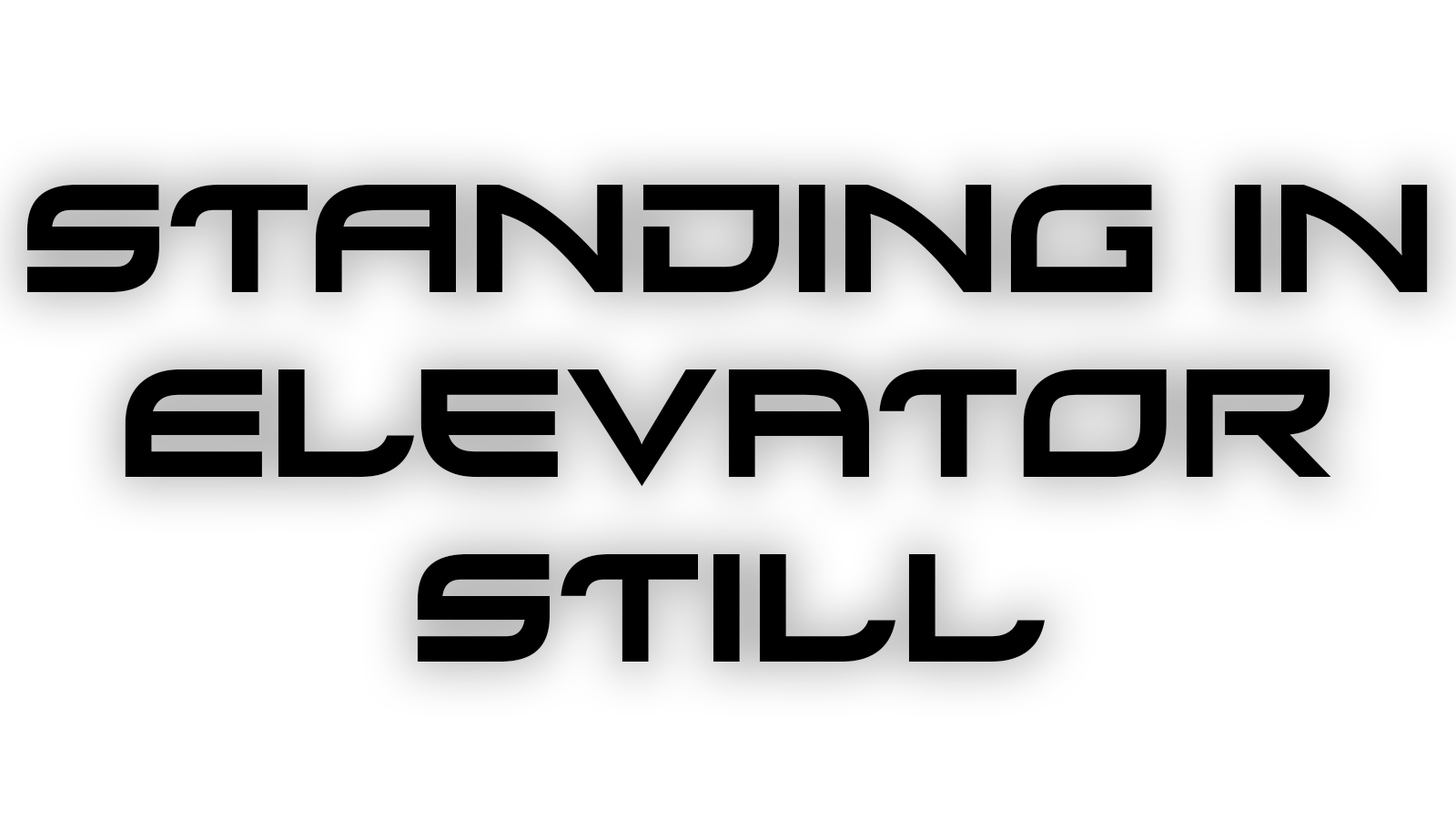
<style>
.page{position:relative;width:1456px;height:819px;background:#ffffff}
.page>*{position:absolute;margin:0}
.t1{font:154.2px "Xirod-Regular";color:#000000}
</style>
<div class="page">
<p class="t1" style="left:26px;top:185px;width:1402px;height:477px;text-align:center">Standing in<br>elevator<br>still</p>
</div>
